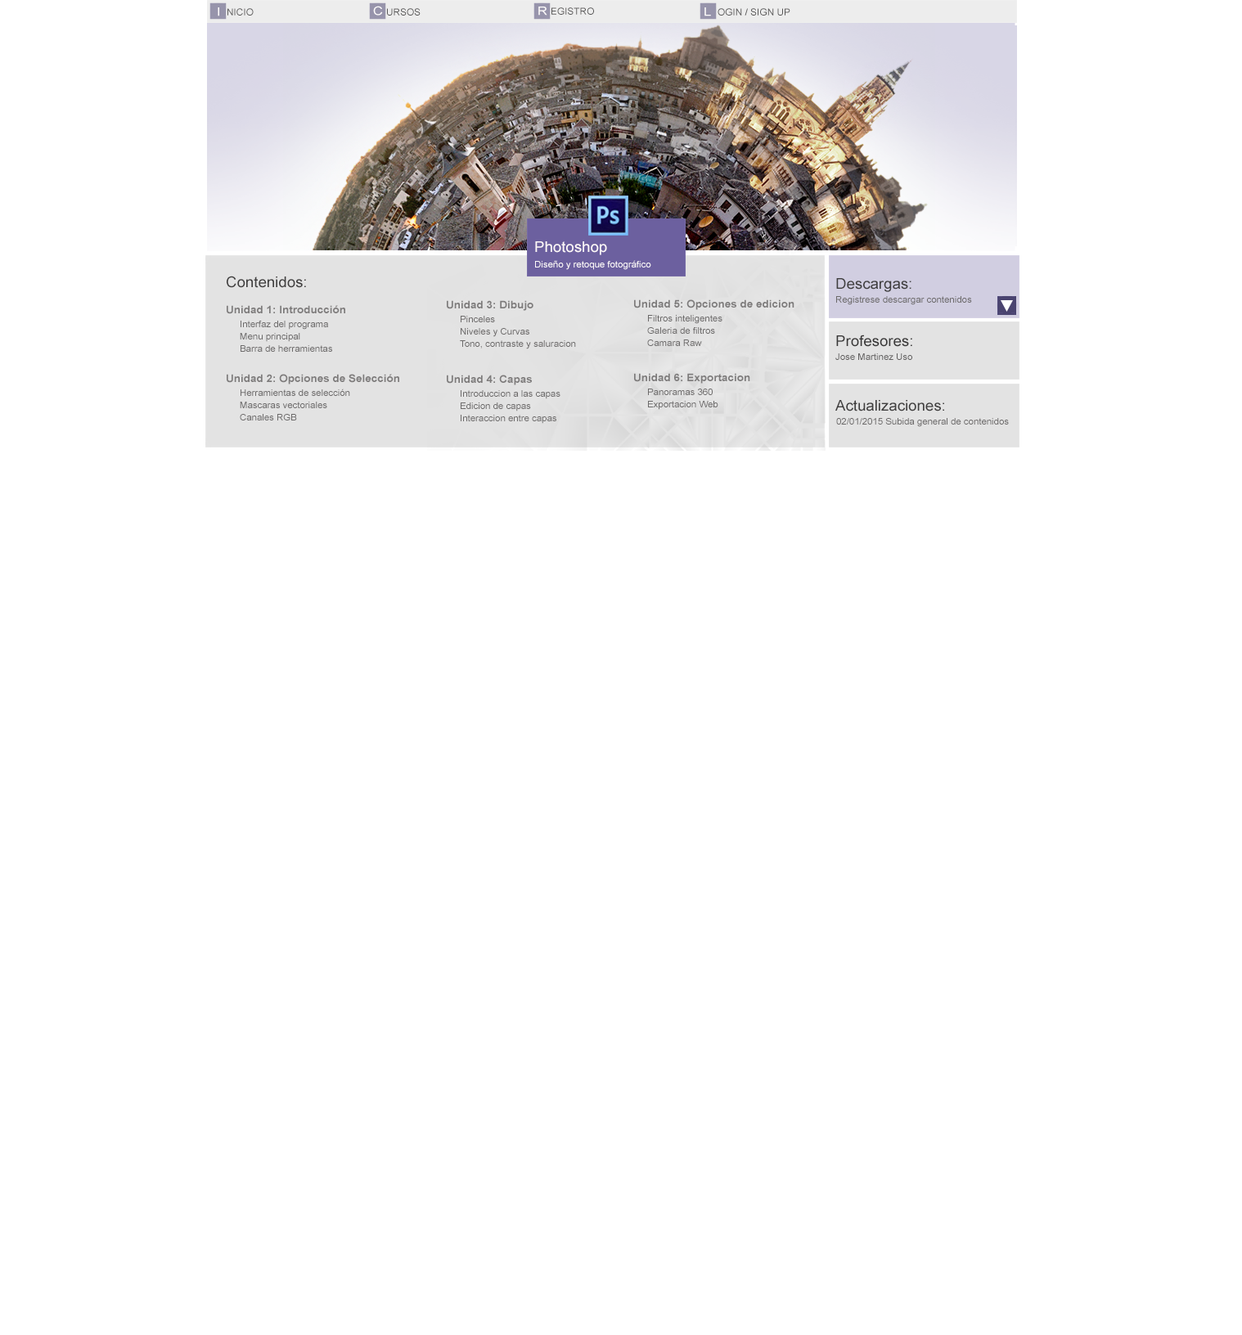
<style>
.page{position:relative;width:1242px;height:1335px;background:#ffffff}
.page>*{position:absolute;margin:0}
.t1{font:11.8px "ArialMT";color:#fffdfd;scale:1.15 1}
.t2{font:9.4px "ArialMT";color:#575656;scale:1.04 1}
.t3{font:14.7px "ArialMT";color:#fff9f9;scale:1.04 1}
.t4{font:9px "ArialMT";color:#fffbfb;scale:1.04 1}
.t5{font:14.7px "ArialMT";color:#3f3e3e;scale:1.04 1}
.t6{font:10.7px "Arial-BoldMT";color:#7d7b7b;scale:1.03 1}
.t7{font:9px "ArialMT";color:#6b6969;scale:1.04 1}
</style>
<div class="page">
<p class="t1" style="left:373px;top:6px;width:10px;height:10px">C</p>
<p class="t1" style="left:218px;top:7px;width:1px;height:9px">I</p>
<p class="t2" style="left:227px;top:8px;width:27px;height:8px">NICIO</p>
<p class="t2" style="left:387px;top:8px;width:34px;height:8px">URSOS</p>
<p class="t1" style="left:538px;top:7px;width:9px;height:9px">R</p>
<p class="t2" style="left:551px;top:7px;width:43px;height:8px">EGISTRO</p>
<p class="t1" style="left:704px;top:7px;width:7px;height:9px">L</p>
<p class="t2" style="left:718px;top:8px;width:72px;height:8px">OGIN / SIGN UP</p>
<p class="t3" style="left:535px;top:241px;width:72px;height:14px">Photoshop</p>
<p class="t4" style="left:535px;top:260px;width:116px;height:10px">Diseño y retoque fotográfico</p>
<p class="t5" style="left:227px;top:276px;width:79px;height:12px">Contenidos:</p>
<p class="t5" style="left:836px;top:278px;width:75px;height:14px">Descargas:</p>
<p class="t6" style="left:227px;top:305px;width:118px;height:9px">Unidad 1: Introducción</p>
<p class="t6" style="left:447px;top:300px;width:86px;height:11px">Unidad 3: Dibujo</p>
<p class="t6" style="left:634px;top:299px;width:160px;height:11px">Unidad 5: Opciones de edicion</p>
<p class="t7" style="left:836px;top:296px;width:136px;height:9px">Registrese descargar contenidos</p>
<p class="t7" style="left:461px;top:316px;width:34px;height:6px">Pinceles</p>
<p class="t7" style="left:648px;top:315px;width:74px;height:9px">Filtros inteligentes</p>
<p class="t7" style="left:241px;top:321px;width:87px;height:9px">Interfaz del programa</p>
<p class="t7" style="left:461px;top:328px;width:68px;height:9px">Niveles y Curvas</p>
<p class="t7" style="left:647px;top:327px;width:68px;height:7px">Galeria de filtros</p>
<p class="t7" style="left:240px;top:333px;width:60px;height:9px">Menu principal</p>
<p class="t7" style="left:460px;top:340px;width:116px;height:9px">Tono, contraste y saluracion</p>
<p class="t7" style="left:647px;top:340px;width:55px;height:6px">Camara Raw</p>
<p class="t5" style="left:836px;top:335px;width:76px;height:12px">Profesores:</p>
<p class="t7" style="left:241px;top:345px;width:91px;height:7px">Barra de herramientas</p>
<p class="t7" style="left:835px;top:353px;width:77px;height:7px">Jose Martinez Uso</p>
<p class="t6" style="left:227px;top:374px;width:172px;height:11px">Unidad 2: Opciones de Selección</p>
<p class="t6" style="left:447px;top:375px;width:85px;height:10px">Unidad 4: Capas</p>
<p class="t6" style="left:634px;top:373px;width:116px;height:11px">Unidad 6: Exportacion</p>
<p class="t7" style="left:241px;top:389px;width:109px;height:7px">Herramientas de selección</p>
<p class="t7" style="left:648px;top:389px;width:65px;height:6px">Panoramas 360</p>
<p class="t7" style="left:240px;top:402px;width:87px;height:6px">Mascaras vectoriales</p>
<p class="t7" style="left:461px;top:390px;width:99px;height:9px">Introduccion a las capas</p>
<p class="t7" style="left:648px;top:401px;width:70px;height:9px">Exportacion Web</p>
<p class="t5" style="left:835px;top:400px;width:109px;height:12px">Actualizaciones:</p>
<p class="t7" style="left:240px;top:414px;width:57px;height:7px">Canales RGB</p>
<p class="t7" style="left:461px;top:403px;width:70px;height:9px">Edicion de capas</p>
<p class="t7" style="left:461px;top:415px;width:95px;height:9px">Interaccion entre capas</p>
<p class="t7" style="left:836px;top:418px;width:173px;height:9px">02/01/2015 Subida general de contenidos</p>
</div>
